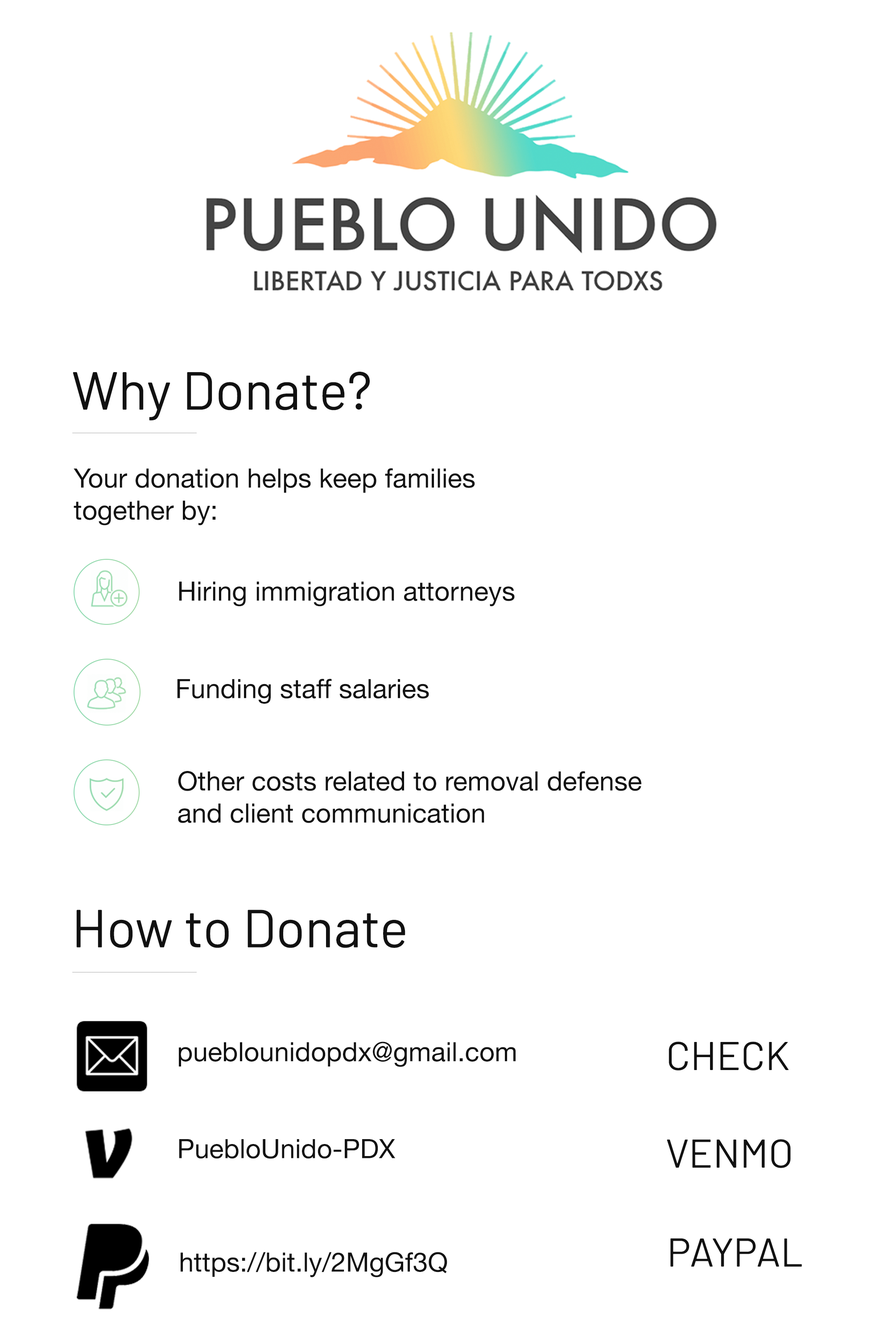
<style>
.page{position:relative;width:892px;height:1337px;background:#ffffff}
.page>*{position:absolute;margin:0}
.t1{font:53.5px "Barlow-Regular";color:#111111}
.t2{font:26.7px "HelveticaNeue";color:#111111}
.t3{font:40.1px "Barlow-Regular";color:#111111}
</style>
<div class="page">
<p class="t1" style="left:73px;top:372px;width:297px;height:49px">Why Donate?</p>
<p class="t2" style="left:74px;top:468px;width:401px;height:58px">Your donation helps keep families <br>together by:</p>
<p class="t2" style="left:179px;top:582px;width:335px;height:25px">Hiring immigration attorneys</p>
<p class="t2" style="left:177px;top:679px;width:252px;height:25px">Funding staff salaries</p>
<p class="t2" style="left:178px;top:771px;width:463px;height:52px">Other costs related to removal defense<br>and client communication</p>
<p class="t1" style="left:76px;top:910px;width:329px;height:38px">How to Donate</p>
<p class="t2" style="left:179px;top:1042px;width:336px;height:25px">pueblounidopdx@gmail.com</p>
<p class="t3" style="left:668px;top:1042px;width:120px;height:29px">CHECK</p>
<p class="t2" style="left:179px;top:1139px;width:216px;height:20px">PuebloUnido-PDX</p>
<p class="t3" style="left:666px;top:1139px;width:124px;height:29px">VENMO</p>
<p class="t3" style="left:670px;top:1238px;width:132px;height:29px">PAYPAL</p>
<p class="t2" style="left:181px;top:1252px;width:266px;height:26px">https://bit.ly/2MgGf3Q</p>
</div>
